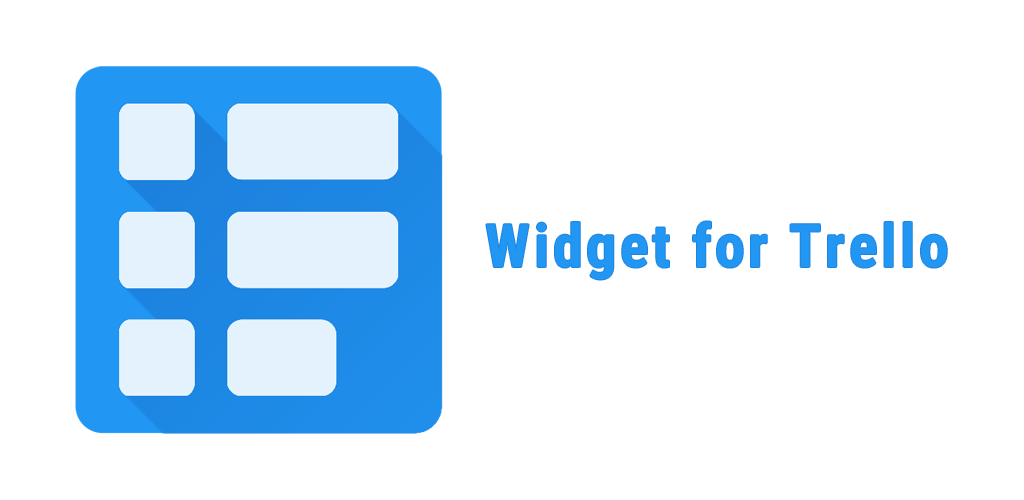
<style>
.page{position:relative;width:1024px;height:500px;background:#ffffff}
.page>*{position:absolute;margin:0}
.t1{font:60px "RobotoCondensed-Bold";letter-spacing:0.06em;color:#2196f3}
</style>
<div class="page">
<p class="t1" style="left:486px;top:221px;width:461px;height:59px">Widget for Trello</p>
</div>
